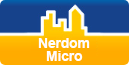
<style>
.page{position:relative;width:129px;height:65px;background:#16428b}
.page>*{position:absolute;margin:0}
.t1{font:14.3px "Arial-BoldMT";letter-spacing:-0.025em;color:#fffefe}
</style>
<div class="page">
<p class="t1" style="left:38px;top:38px;width:52px;height:10px">Nerdom</p>
<p class="t1" style="left:46px;top:51px;width:37px;height:10px">Micro</p>
</div>
